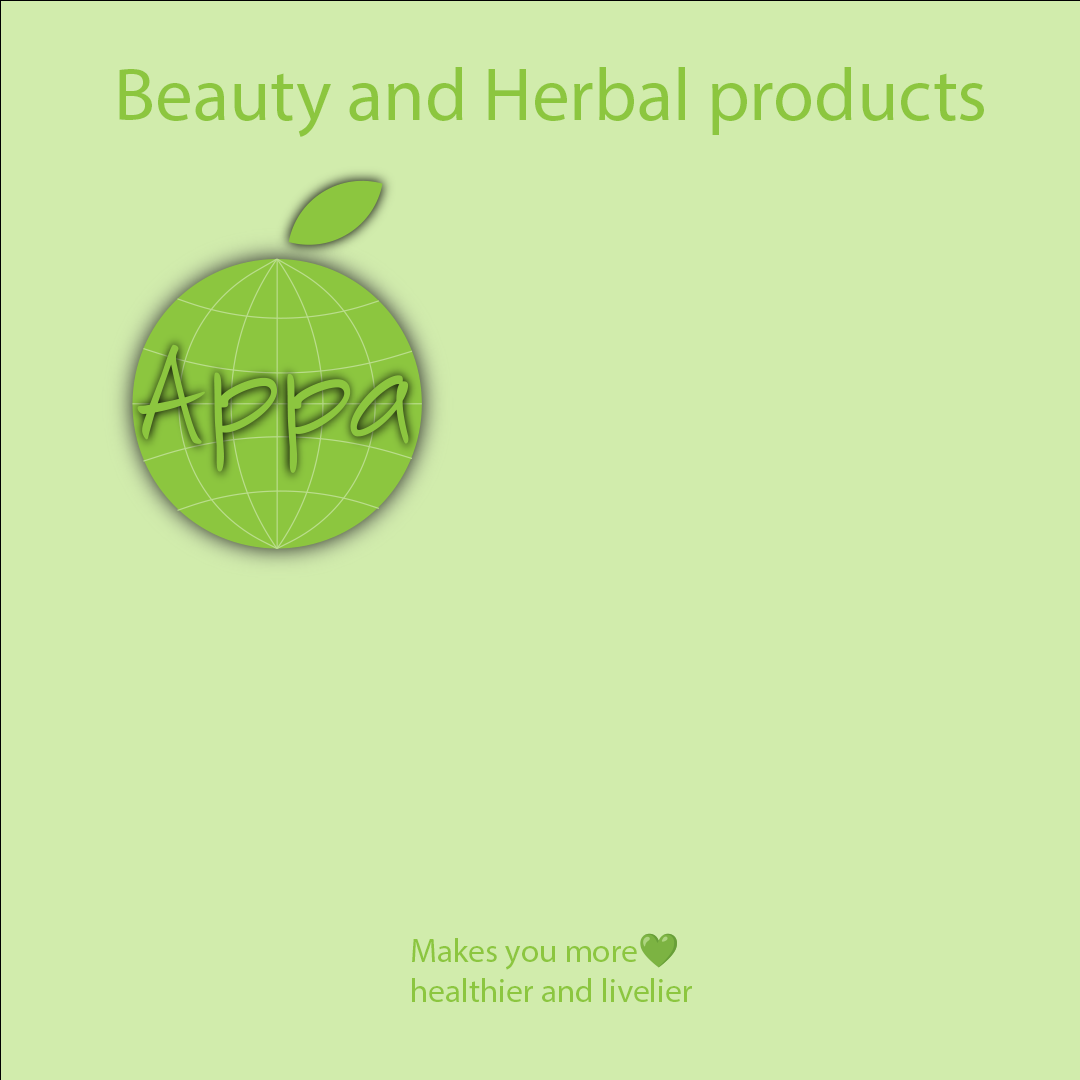
<style>
.page{position:relative;width:1080px;height:1080px;background:#d1ecac}
.page>*{position:absolute;margin:0}
.t1{font:75px "MyriadPro-Regular";color:#8cc63f}
.t2{font:33.3px "MyriadPro-Regular";color:#8cc63f}
.t3{font:33.3px "NotoColorEmoji-SVG";color:#8cc63f}
</style>
<div class="page">
<p class="t1" style="left:119px;top:67px;width:865px;height:70px">Beauty and Herbal products</p>
<p class="t2" style="left:412px;top:933px;width:280px;height:69px">Makes you more<span class="t3">💚</span><br>healthier and livelier</p>
</div>
